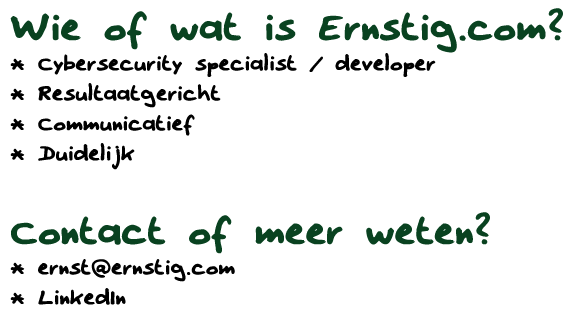
<style>
.page{position:relative;width:571px;height:319px;background:#ffffff}
.page>*{position:absolute;margin:0}
.t1{font:25px "Erno2002";color:#000000}
.t2{font:45px "Erno2002";color:#094220}
</style>
<div class="page">
<p class="t1" style="left:10px;top:8px;width:553px;height:297px"><span class="t2">Wie of wat is Ernstig.com?<br></span>* Cybersecurity specialist / developer<br>* Resultaatgericht<br>* Communicatief<br>* Duidelijk<br><br><span class="t2">Contact of meer weten?<br></span>* ernst@ernstig.com<br>* LinkedIn</p>
</div>
